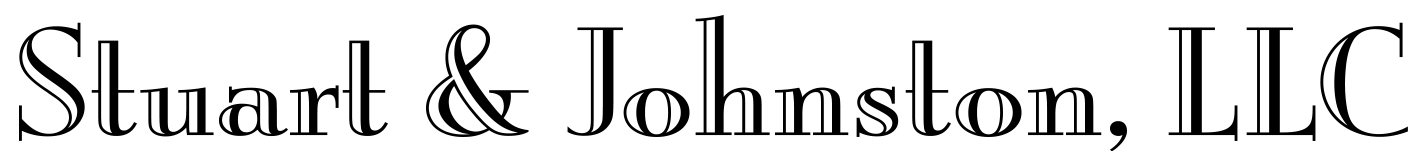
<style>
.page{position:relative;width:1423px;height:151px;background:#ffffff}
.page>*{position:absolute;margin:0}
.t1{font:161.3px "BurlingtonLetPlain";color:#000000;scale:1.13 1}
</style>
<div class="page">
<p class="t1" style="left:19px;top:14px;width:1389px;height:138px">Stuart &amp; Johnston, LLC</p>
</div>
